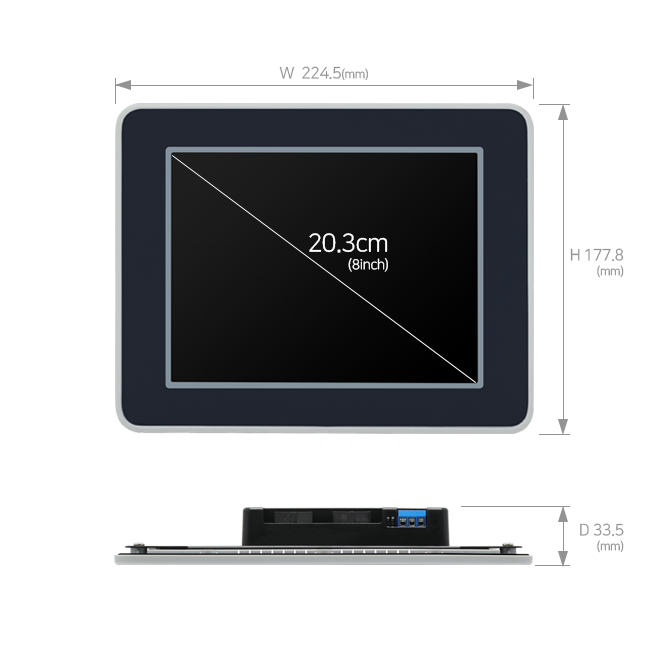
<style>
.page{position:relative;width:650px;height:650px;background:#ffffff}
.page>*{position:absolute;margin:0}
.t1{font:16px "NanumSquareR";letter-spacing:-0.03em;color:#939393}
.t2{font:12px "NanumSquareR";letter-spacing:-0.03em;color:#939393}
.t3{font:14px/18px "NanumSquareR";letter-spacing:-0.03em;color:#ffffff}
.t4{font:25px/18px "NanumSquareR";letter-spacing:-0.03em;color:#ffffff}
.t5{font:16px/15px "NanumSquareR";letter-spacing:-0.03em;color:#939393}
.t6{font:12px/15px "NanumSquareR";letter-spacing:-0.03em;color:#939393}
</style>
<div class="page">
<p class="t1" style="left:279px;top:66px;width:89px;height:15px">W  224.5<span class="t2">(mm)</span></p>
<p class="t3" style="left:309px;top:233px;width:79px;height:39px;text-align:right"><span class="t4">20.3cm<br></span>(8inch)</p>
<p class="t5" style="left:570px;top:248px;width:54px;height:30px;text-align:right">H 177.8<br><span class="t6">(mm)</span></p>
<p class="t5" style="left:580px;top:523px;width:44px;height:30px;text-align:right">D 33.5<br><span class="t6">(mm)</span></p>
</div>
